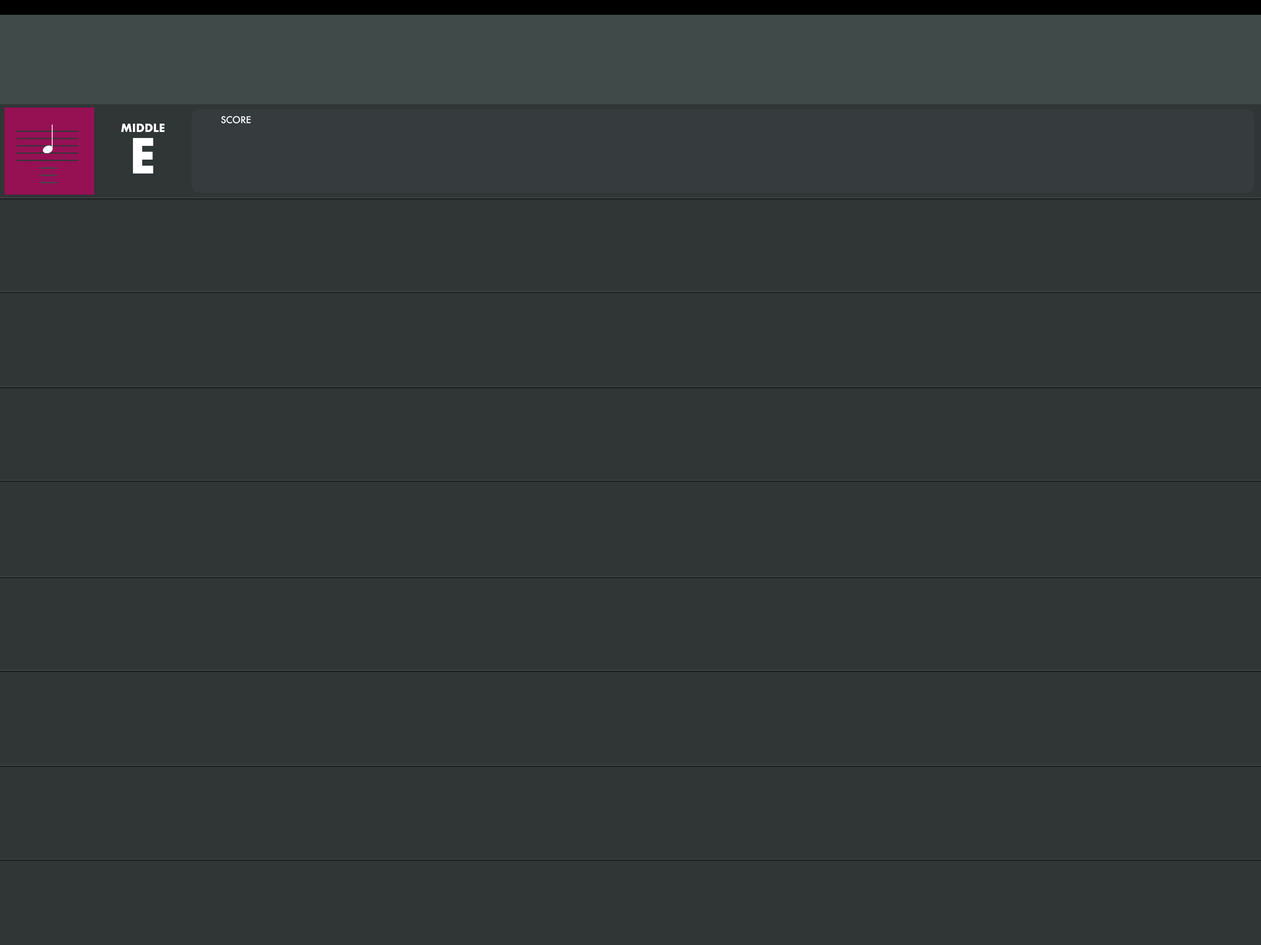
<style>
.page{position:relative;width:1261px;height:945px;background:#303536}
.page>*{position:absolute;margin:0}
.t1{font:11.1px "Futura-Bold";letter-spacing:-0.01em;color:#ffffff}
.t2{font:9.2px "Futura-Medium";letter-spacing:-0.01em;color:#ffffff}
.t3{font:47.1px "Futura-Bold";letter-spacing:-0.01em;color:#ffffff}
</style>
<div class="page">
<p class="t1" style="left:121px;top:124px;width:44px;height:8px">MIDDLE</p>
<p class="t2" style="left:221px;top:116px;width:30px;height:8px">SCORE</p>
<p class="t3" style="left:133px;top:138px;width:20px;height:36px">E</p>
</div>
